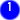
<style>
.page{position:relative;width:20px;height:20px;background:#0000ff}
.page>*{position:absolute;margin:0}
.t1{font:14px "Vrinda";color:#ffffff}
</style>
<div class="page">
<p class="t1" style="left:8px;top:2px;width:3px;height:9px">1</p>
</div>
